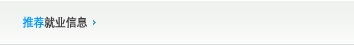
<style>
.page{position:relative;width:354px;height:45px}
.page>*{position:absolute;margin:0}
.t1{font:12px "SimHei";color:#3e3e3e;scale:0.9 1}
.t2{font:12px "SimHei";color:#0099ff;scale:0.9 1}
</style>
<div class="page">
<p class="t1" style="left:22px;top:16px;width:65px;height:12px"><span class="t2">推荐</span>就业信息</p>
</div>
